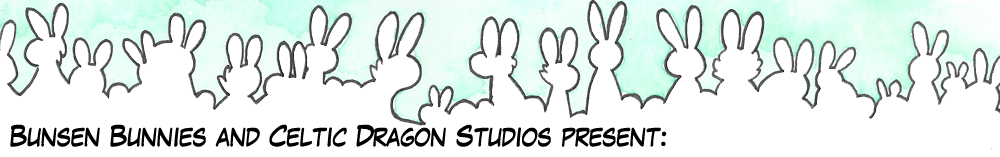
<style>
.page{position:relative;width:1000px;height:157px;background:#ffffff}
.page>*{position:absolute;margin:0}
.t1{font:24px "LaffayetteComicPro";color:#000000}
</style>
<div class="page">
<p class="t1" style="left:10px;top:124px;width:657px;height:23px">Bunsen Bunnies and Celtic Dragon Studios present:</p>
</div>
